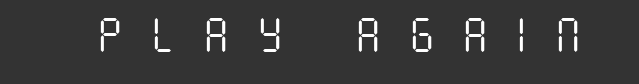
<style>
.page{position:relative;width:639px;height:84px;background:#333333}
.page>*{position:absolute;margin:0}
.t1{font:48px "SevenSegmentRegular";letter-spacing:0.62em;color:#ffffff}
</style>
<div class="page">
<p class="t1" style="left:100px;top:18px;width:478px;height:34px">PLAY AGAIN</p>
</div>
